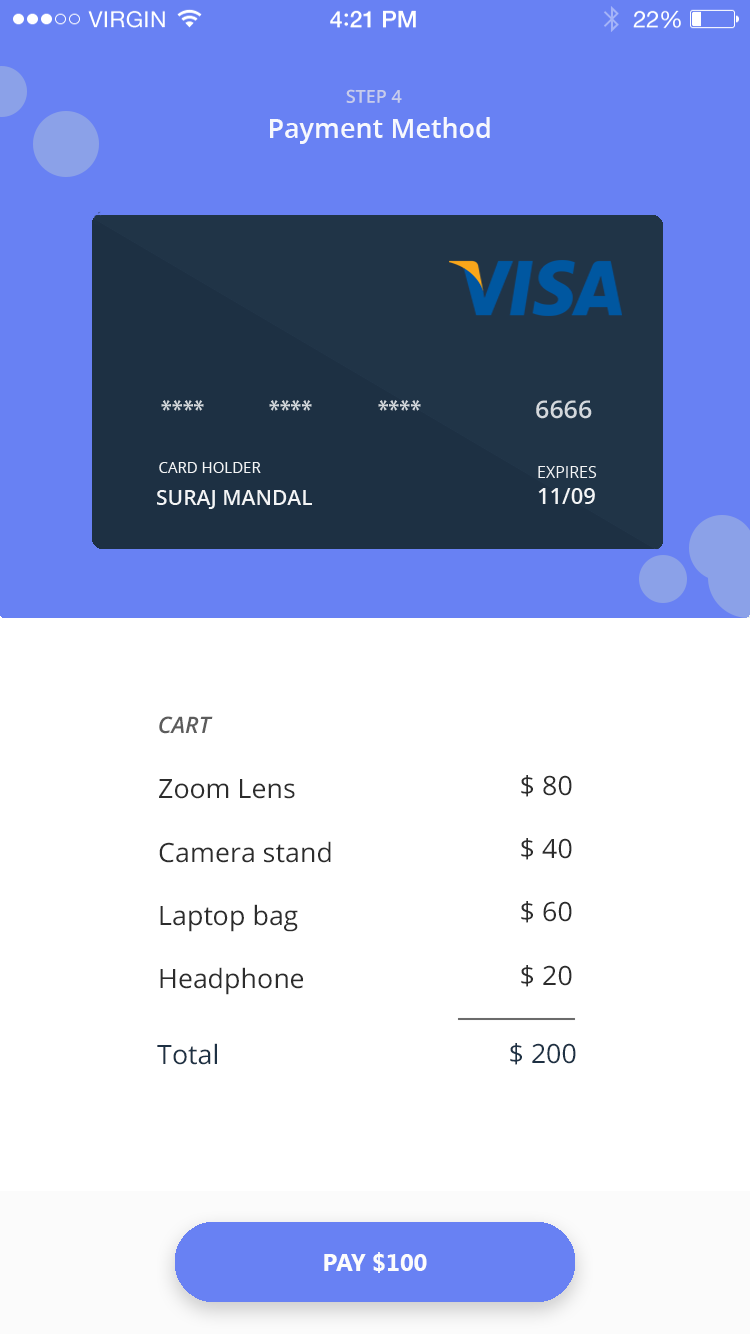
<style>
.page{position:relative;width:750px;height:1334px;background:#ffffff}
.page>*{position:absolute;margin:0}
.t1{font:18px "OpenSans-Semibold";color:#c7cceb}
.t2{font:27px "OpenSans-Semibold";color:#fefefe}
.t3{font:22.6px "OpenSans-SemiboldItalic";color:#4f4f4f}
.t4{font:26.4px "OpenSans";color:#2c2c2c}
.t5{font:26.4px "OpenSans";color:#1e3144}
.t6{font:24px "SegoeUI-Bold";color:#fcfcfc}
</style>
<div class="page">
<p class="t1" style="left:346px;top:89px;width:56px;height:14px">STEP 4</p>
<p class="t2" style="left:270px;top:117px;width:220px;height:27px;opacity:0.94">Payment Method</p>
<p class="t3" style="left:159px;top:716px;width:54px;height:18px;opacity:0.95">CART</p>
<p class="t4" style="left:159px;top:779px;width:172px;height:216px">Zoom Lens<br><br>Camera stand<br><br>Laptop bag<br><br>Headphone</p>
<p class="t4" style="left:521px;top:775px;width:51px;height:212px">$ 80<br><br>$ 40<br><br>$ 60<br><br>$ 20</p>
<p class="t5" style="left:157px;top:1043px;width:60px;height:22px">Total</p>
<p class="t5" style="left:510px;top:1043px;width:66px;height:22px">$ 200</p>
<p class="t6" style="left:324px;top:1252px;width:103px;height:21px">PAY $100</p>
</div>
